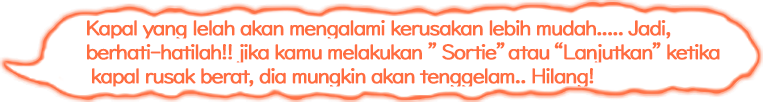
<style>
.page{position:relative;width:763px;height:102px;background:#ffffff}
.page>*{position:absolute;margin:0}
.t1{font:21px/24px "UDDigiKyokashoNP-R";letter-spacing:-0.08em;color:#ff6e40;font-weight:bold}
</style>
<div class="page">
<p class="t1" style="left:87px;top:20px;width:633px;height:67px">Kapal yang lelah akan mengalami kerusakan lebih mudah..... Jadi, <br>berhati-hatilah!! jika kamu melakukan ”Sortie”atau“Lanjutkan”ketika<br> kapal rusak berat, dia mungkin akan tenggelam.. Hilang!</p>
</div>
